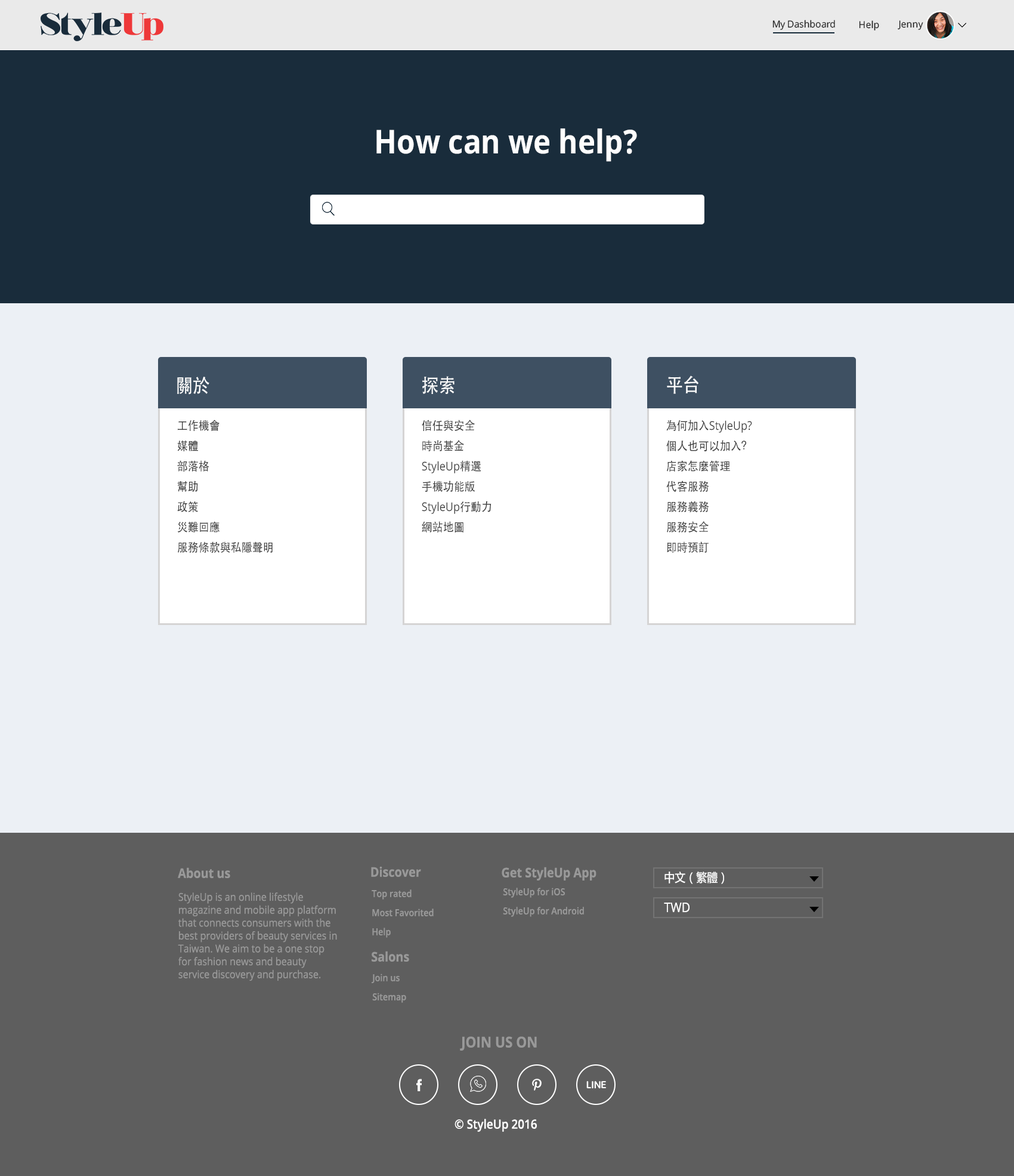
<style>
.page{position:relative;width:1014px;height:1176px;background:#ecf0f5}
.page>*{position:absolute;margin:0}
.t1{font:9.5px "OpenSans";letter-spacing:-0.015em;color:#1a1a1a}
.t2{font:9.5px "OpenSans";color:#1a1a1a}
.t3{font:32.8px "OpenSans-Bold";color:#fefefe;scale:0.9 1}
.t4{font:19.1px "STHeiti";color:#ffffff;scale:0.9 1}
.t5{font:11.9px/20.3px "STHeiti";color:#3e3e3e;scale:0.9 1}
.t6{font:11.9px/20.3px "OpenSans";color:#3e3e3e;scale:0.9 1}
.t7{font:13.1px "OpenSans-Bold";color:#999999;scale:0.9 1}
.t8{font:11.9px "MicrosoftYaHei-Regular";color:#ffffff;scale:0.9 1}
.t9{font:10.7px "OpenSans";color:#999999;scale:0.9 1}
.t10{font:9.5px/19.1px "OpenSans-Semibold";color:#999999;scale:0.9 1}
.t11{font:13.1px "OpenSans";color:#ffffff;scale:0.9 1}
.t12{font:14.9px "OpenSans-Bold";color:#999999;scale:0.9 1}
.t13{font:12.5px "OpenSans-Semibold";color:#ffffff;scale:0.9 1}
</style>
<div class="page">
<p class="t1" style="left:773px;top:20px;width:62px;height:10px">My Dashboard</p>
<p class="t2" style="left:859px;top:20px;width:21px;height:10px">Help</p>
<p class="t2" style="left:898px;top:20px;width:26px;height:10px">Jenny</p>
<p class="t3" style="left:377px;top:128px;width:260px;height:34px">How can we help?</p>
<p class="t4" style="left:177px;top:377px;width:32px;height:17px">關於</p>
<p class="t4" style="left:422px;top:376px;width:33px;height:18px">探索</p>
<p class="t4" style="left:667px;top:375px;width:32px;height:19px">平台</p>
<p class="t5" style="left:177px;top:419px;width:96px;height:134px;text-align:right">工作機會<br>媒體<br>部落格<br>幫助<br>政策<br>災難回應<br>服務條款與私隱聲明</p>
<p class="t5" style="left:422px;top:419px;width:70px;height:113px;text-align:right">信任與安全<br>時尚基金<span class="t6"><br>StyleUp</span>精選<br>手機功能版<span class="t6"><br>StyleUp</span>行動力<br>網站地圖</p>
<p class="t5" style="left:667px;top:419px;width:85px;height:134px;text-align:right">為何加入<span class="t6">StyleUp?<br></span>個人也可以加入？<br>店家怎麼管理<br>代客服務<br>服務義務<br>服務安全<br>即時預訂</p>
<p class="t7" style="left:178px;top:867px;width:52px;height:11px">About us</p>
<p class="t7" style="left:371px;top:866px;width:50px;height:11px">Discover</p>
<p class="t7" style="left:502px;top:866px;width:95px;height:14px">Get StyleUp App</p>
<p class="t8" style="left:665px;top:871px;width:59px;height:13px">中文（繁體）</p>
<p class="t9" style="left:178px;top:892px;width:159px;height:88px;text-align:right">StyleUp is an online lifestyle magazine and mobile app platform that connects consumers with the best providers of beauty services in Taiwan. We aim to be a one stop for fashion news and beauty service discovery and purchase.</p>
<p class="t10" style="left:372px;top:889px;width:62px;height:48px;text-align:right">Top rated<br>Most Favorited<br>Help</p>
<p class="t10" style="left:503px;top:887px;width:81px;height:30px;text-align:right">StyleUp for iOS<br>StyleUp for Android</p>
<p class="t11" style="left:664px;top:902px;width:26px;height:10px">TWD</p>
<p class="t7" style="left:372px;top:951px;width:37px;height:10px">Salons</p>
<p class="t10" style="left:372px;top:973px;width:34px;height:29px;text-align:right">Join us<br>Sitemap</p>
<p class="t12" style="left:460px;top:1036px;width:77px;height:14px">JOIN US ON</p>
<p class="t13" style="left:455px;top:1118px;width:82px;height:13px">© StyleUp 2016</p>
</div>
